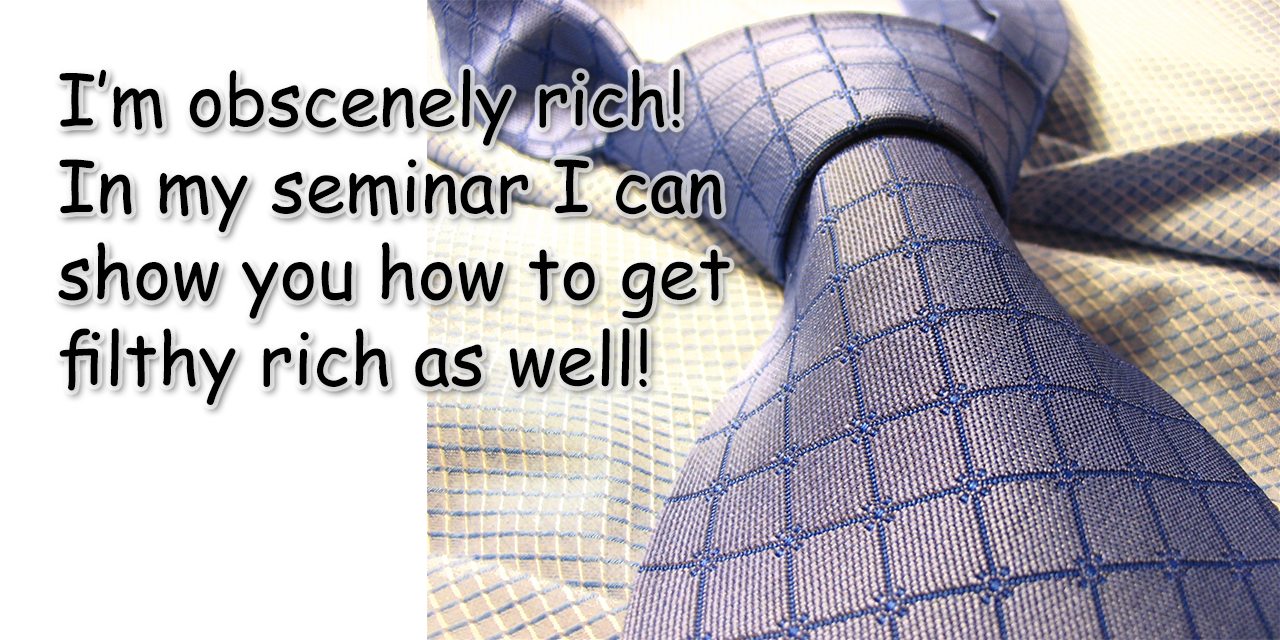
<style>
.page{position:relative;width:1280px;height:640px;background:#ffffff}
.page>*{position:absolute;margin:0}
.t1{font:72px "ComicSansMS";color:#000000}
</style>
<div class="page">
<p class="t1" style="left:58px;top:69px;width:672px;height:336px">I’m obscenely rich!<br>In my seminar I can<br>show you how to get<br>filthy rich as well!</p>
</div>
